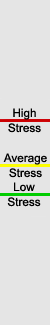
<style>
.page{position:relative;width:50px;height:325px;background:#e5e5e5}
.page>*{position:absolute;margin:0}
.t1{font:11.7px/14.9px "ArialMT";color:#000000}
</style>
<div class="page">
<p class="t1" style="left:8px;top:108px;width:33px;height:25px;text-align:center">High<br>Stress</p>
<p class="t1" style="left:3px;top:153px;width:44px;height:25px;text-align:center">Average<br>Stress</p>
<p class="t1" style="left:7px;top:182px;width:34px;height:25px;text-align:center">Low<br>Stress</p>
</div>
